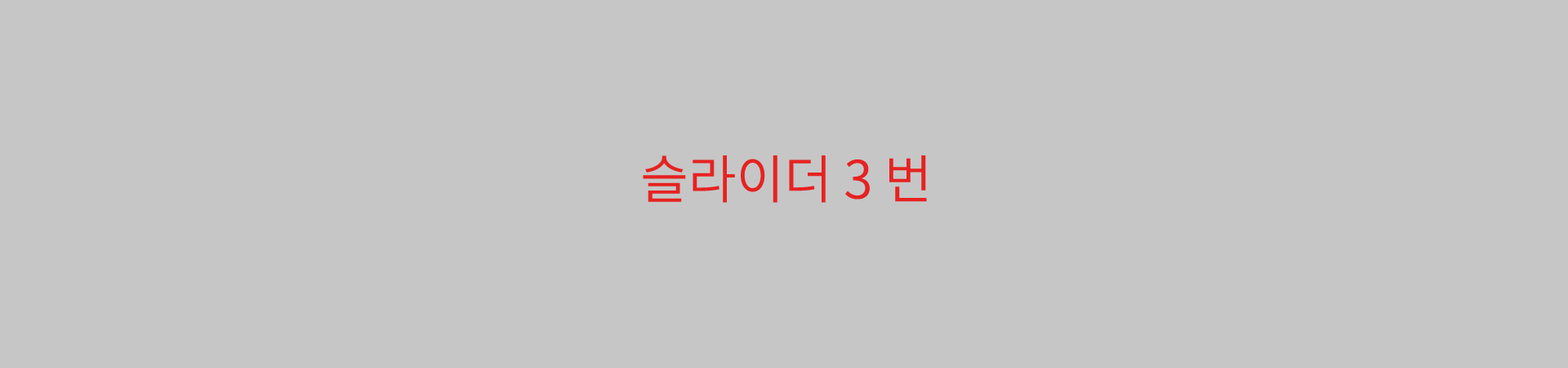
<style>
.page{position:relative;width:1568px;height:368px;background:#c6c6c6}
.page>*{position:absolute;margin:0}
.t1{font:52.2px "NotoSansCJKkr-DemiLight";color:#e62221}
</style>
<div class="page">
<p class="t1" style="left:643px;top:155px;width:284px;height:48px">슬라이더 3 번</p>
</div>
